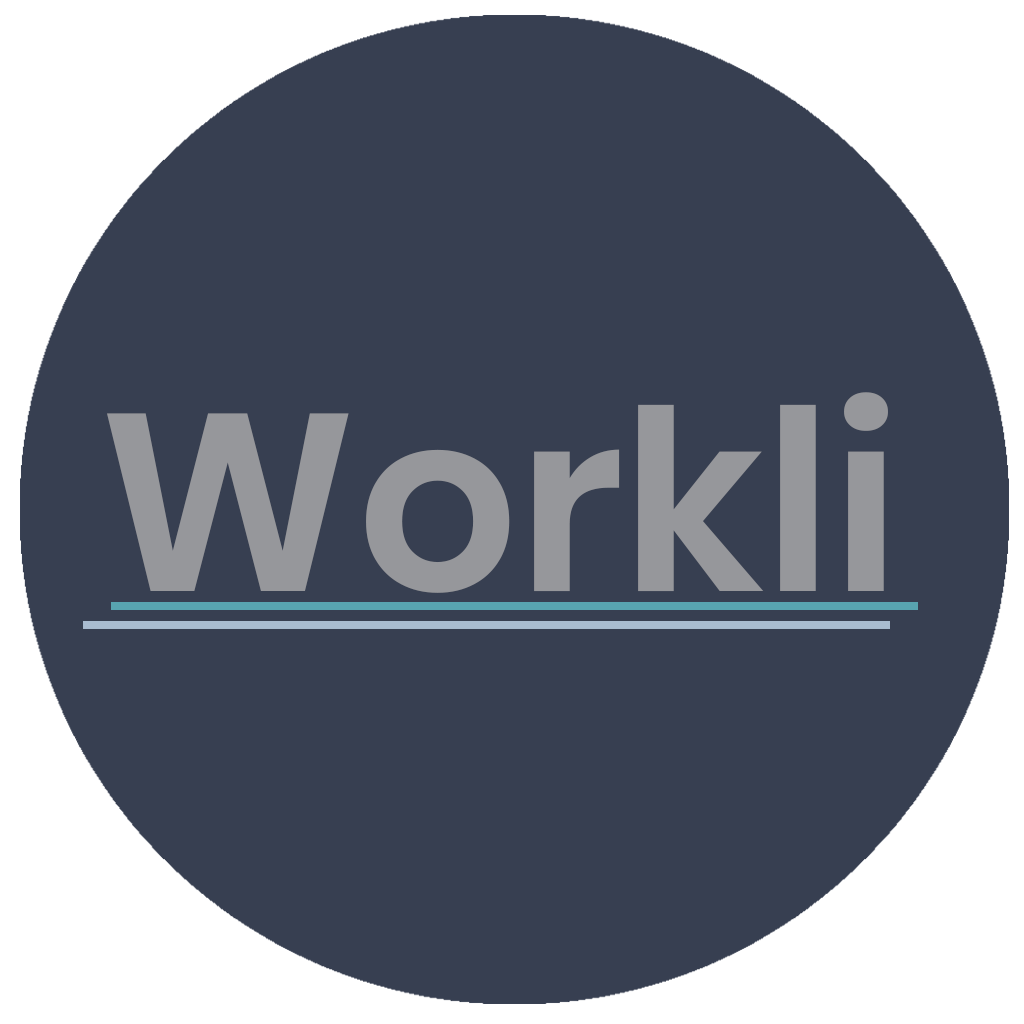
<style>
.page{position:relative;width:1024px;height:1024px;background:#373f51}
.page>*{position:absolute;margin:0}
.t1{font:251.5px "Poppins-SemiBold";color:#96979b}
</style>
<div class="page">
<p class="t1" style="left:107px;top:392px;width:781px;height:201px">Workli</p>
</div>
